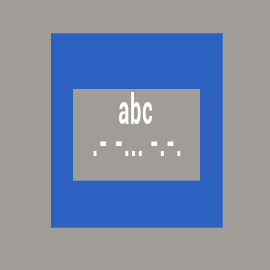
<style>
.page{position:relative;width:270px;height:270px;background:#a09d98}
.page>*{position:absolute;margin:0}
.t1{font:40px "Roboto-Bold";letter-spacing:0.05em;color:#ffffff;scale:0.49 1}
</style>
<div class="page">
<p class="t1" style="left:119px;top:92px;width:33px;height:32px">abc</p>
<p class="t1" style="left:93px;top:141px;width:88px;height:15px">.- -... -.-.</p>
</div>
